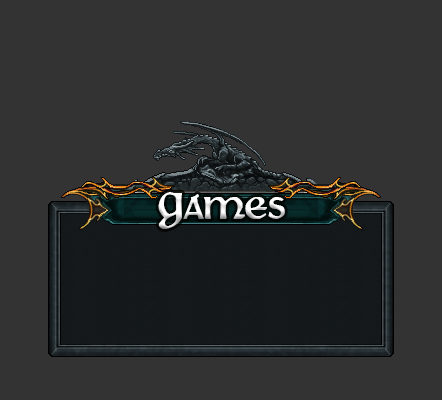
<style>
.page{position:relative;width:442px;height:400px;background:#333333}
.page>*{position:absolute;margin:0}
.t1{font:45px "Martel";color:#fffefe}
</style>
<div class="page">
<p class="t1" style="left:158px;top:192px;width:127px;height:37px">Games</p>
</div>
